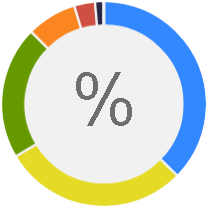
<style>
.page{position:relative;width:208px;height:208px;background:#f1f1f1}
.page>*{position:absolute;margin:0}
.t1{font:72px "ArialMT";color:#6e6e6e}
</style>
<div class="page">
<p class="t1" style="left:76px;top:72px;width:56px;height:54px">%</p>
</div>
